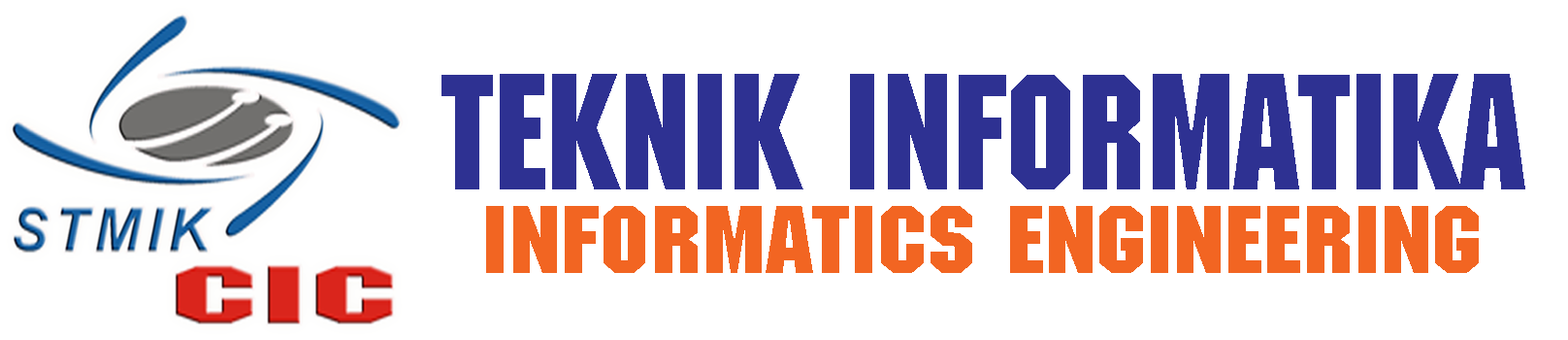
<style>
.page{position:relative;width:1568px;height:340px;background:#ffffff}
.page>*{position:absolute;margin:0}
.t1{font:160.5px "MotorPSMT";color:#2e3192;scale:0.92 1}
.t2{font:93.1px "MotorPSMT";color:#f26522;scale:1.15 1}
</style>
<div class="page">
<p class="t1" style="left:441px;top:74px;width:1084px;height:115px">TEKNIK INFORMATIKA</p>
<p class="t2" style="left:486px;top:206px;width:993px;height:67px">INFORMATICS ENGINEERING</p>
</div>
